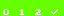
<style>
.page{position:relative;width:64px;height:16px;background:#65ff00}
.page>*{position:absolute;margin:0}
.t1{font:8px "Early-GameBoy";color:#e0f8cf}
</style>
<div class="page">
<p class="t1" style="left:3px;top:9px;width:6px;height:6px">0</p>
<p class="t1" style="left:20px;top:9px;width:4px;height:6px">1</p>
<p class="t1" style="left:35px;top:9px;width:6px;height:6px">2</p>
</div>
